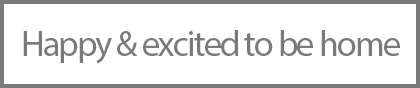
<style>
.page{position:relative;width:420px;height:88px;background:#ffffff}
.page>*{position:absolute;margin:0}
.t1{font:36px "MyriadPro-Regular";letter-spacing:-0.05em;color:#7a7a7a}
</style>
<div class="page">
<p class="t1" style="left:23px;top:30px;width:377px;height:34px">Happy &amp; excited to be home</p>
</div>
